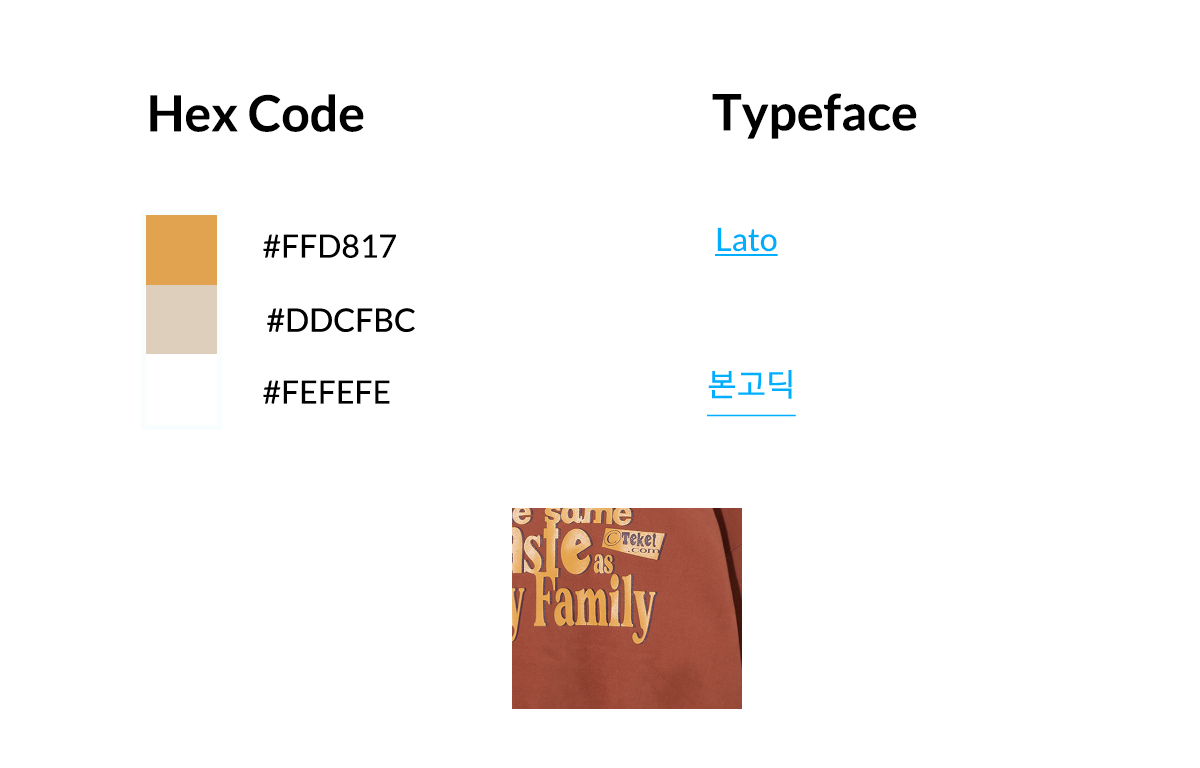
<style>
.page{position:relative;width:1200px;height:768px;background:#ffffff}
.page>*{position:absolute;margin:0}
.t1{font:50px "Lato-Bold";color:#000000}
.t2{font:32px "Lato-Regular";color:#00aeff;text-decoration:underline}
.t3{font:32px "Lato-Regular";color:#000000}
</style>
<div class="page">
<p class="t1" style="left:150px;top:94px;width:214px;height:38px">Hex Code</p>
<p class="t1" style="left:712px;top:93px;width:205px;height:46px">Typeface</p>
<p class="t2" style="left:715px;top:227px;width:63px;height:29px">Lato</p>
<p class="t3" style="left:263px;top:234px;width:133px;height:24px">#FFD817</p>
<p class="t3" style="left:263px;top:380px;width:127px;height:24px">#FEFEFE</p>
</div>
